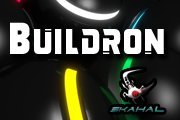
<style>
.page{position:relative;width:180px;height:120px}
.page>*{position:absolute;margin:0}
.t1{font:50px "GalaxyForce";color:#ffffff}
</style>
<div class="page">
<p class="t1" style="left:10px;top:22px;width:154px;height:32px">Buildron</p>
</div>
